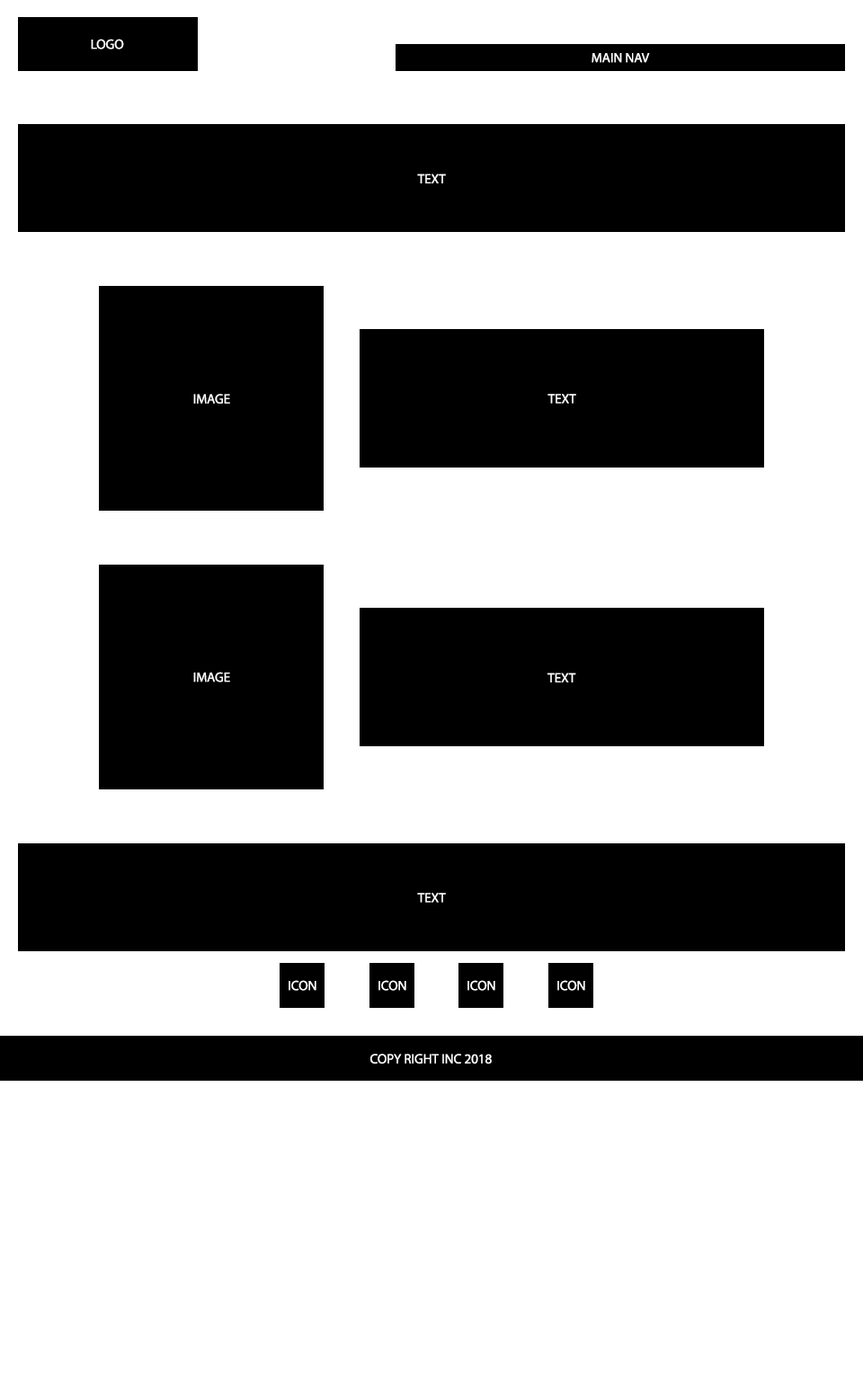
<style>
.page{position:relative;width:863px;height:1381px;background:#ffffff}
.page>*{position:absolute;margin:0}
.t1{font:13.5px "MyriadPro-Regular";color:#ffffff}
</style>
<div class="page">
<p class="t1" style="left:91px;top:39px;width:33px;height:10px">LOGO</p>
<p class="t1" style="left:592px;top:53px;width:58px;height:10px">MAIN NAV</p>
<p class="t1" style="left:417px;top:174px;width:29px;height:9px">TEXT</p>
<p class="t1" style="left:193px;top:394px;width:37px;height:10px">IMAGE</p>
<p class="t1" style="left:548px;top:394px;width:28px;height:10px">TEXT</p>
<p class="t1" style="left:193px;top:672px;width:37px;height:11px">IMAGE</p>
<p class="t1" style="left:548px;top:673px;width:28px;height:10px">TEXT</p>
<p class="t1" style="left:417px;top:893px;width:29px;height:10px">TEXT</p>
<p class="t1" style="left:289px;top:980px;width:28px;height:11px">ICON</p>
<p class="t1" style="left:379px;top:980px;width:27px;height:11px">ICON</p>
<p class="t1" style="left:468px;top:980px;width:27px;height:11px">ICON</p>
<p class="t1" style="left:558px;top:980px;width:27px;height:11px">ICON</p>
<p class="t1" style="left:370px;top:1054px;width:122px;height:10px">COPY RIGHT INC 2018</p>
</div>
